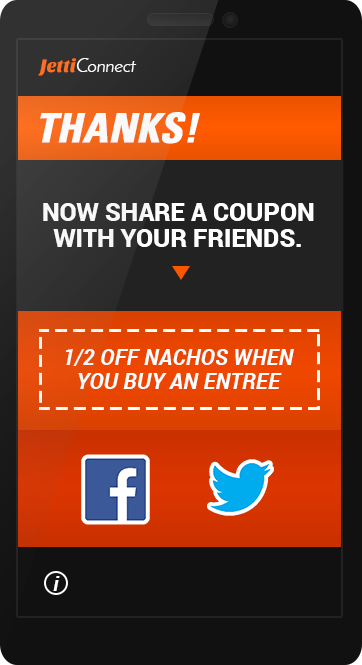
<style>
.page{position:relative;width:362px;height:665px;background:#111111}
.page>*{position:absolute;margin:0}
.t1{font:18.7px "JosefinSans";color:#fd7023}
.t2{font:18.7px "SansitaOne";color:#fd7023}
.t3{font:40.4px "Univers-CondensedBoldOblique";color:#ffffff;text-transform:uppercase;font-weight:bold}
.t4{font:25px/26.1px "Roboto-Black";color:#ffffff}
.t5{font:22.5px/23.5px "Roboto-BoldItalic";color:#ffffff}
.t6{font:20.8px "Roboto-BoldItalic";color:#ffffff}
</style>
<div class="page">
<p class="t1" style="left:38px;top:58px;width:99px;height:18px"><span class="t2">Jetti</span>Connect</p>
<p class="t3" style="left:40px;top:112px;width:160px;height:32px">THANKS!</p>
<p class="t4" style="left:43px;top:203px;width:271px;height:44px;text-align:center">NOW SHARE A COUPON WITH YOUR FRIENDS.</p>
<p class="t5" style="left:65px;top:349px;width:229px;height:40px;text-align:center">1/2 OFF NACHOS WHEN<br>YOU BUY AN ENTREE</p>
<p class="t6" style="left:53px;top:576px;width:7px;height:15px">i</p>
</div>
